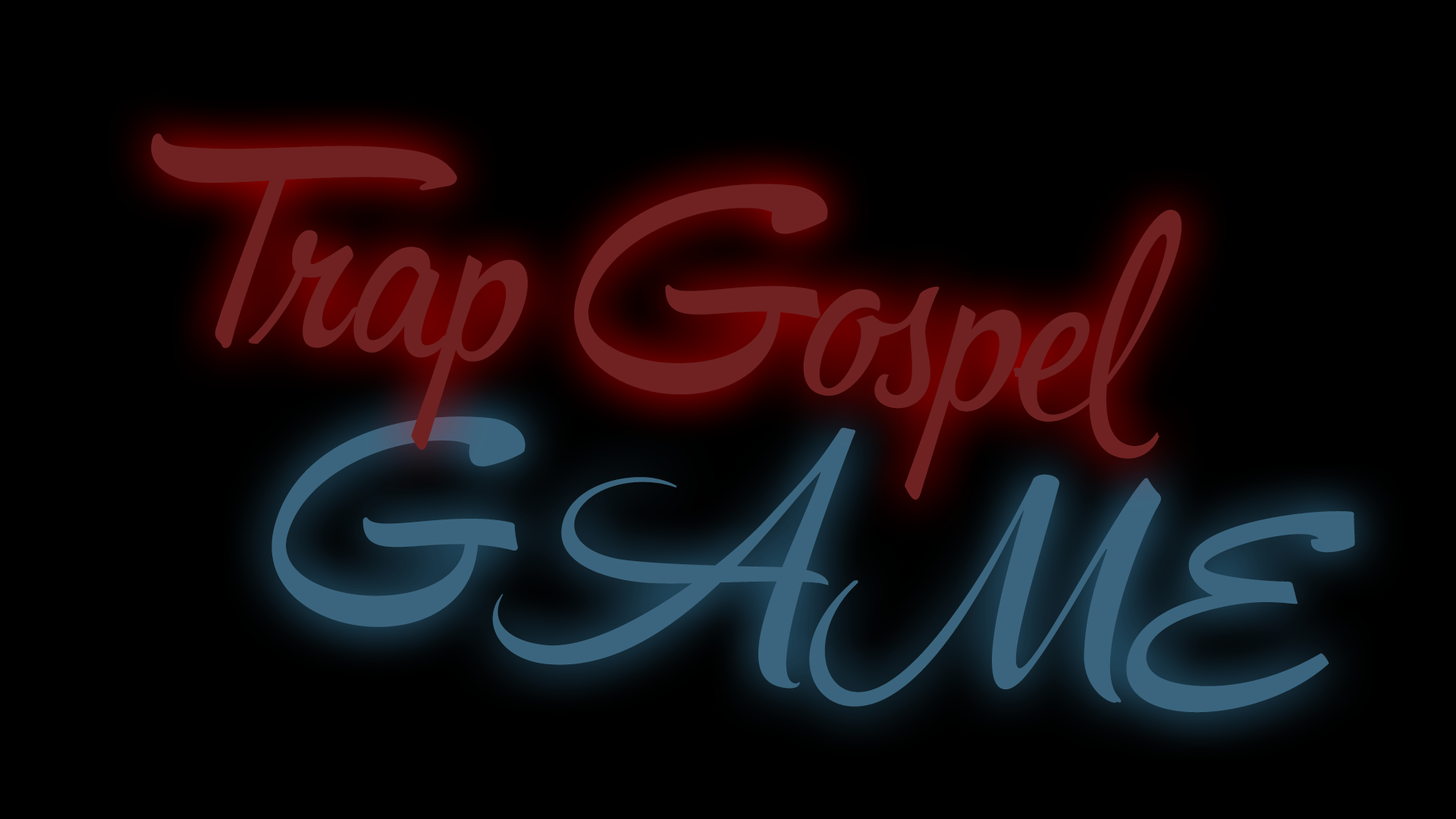
<style>
.page{position:relative;width:1456px;height:819px;background:#000000}
.page>*{position:absolute;margin:0}
.t1{font:252.5px "HipsterScriptPro";color:#702222}
.t2{font:252.5px "HipsterScriptPro";color:#3b657e}
</style>
<div class="page">
<p class="t1" style="left:151px;top:133px;width:1030px;height:367px;rotate:6deg">Trap Gospel</p>
<p class="t2" style="left:271px;top:416px;width:1084px;height:297px;rotate:6deg">GAME</p>
</div>
